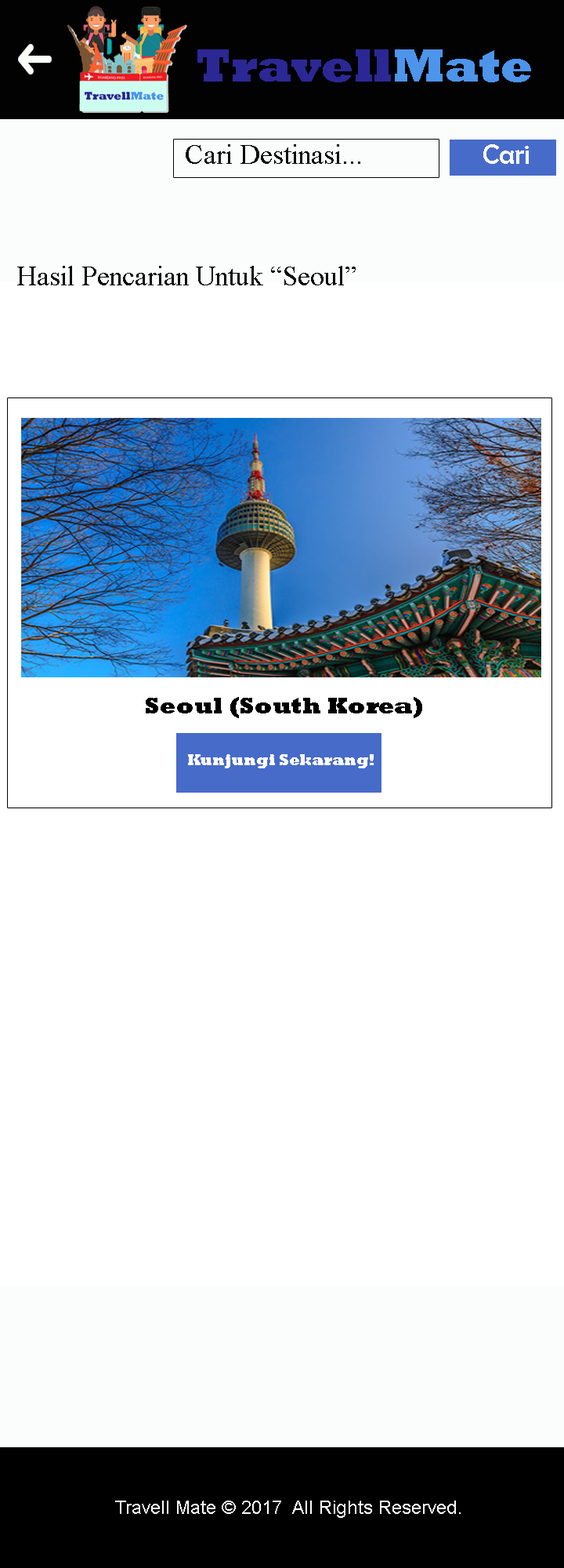
<style>
.page{position:relative;width:564px;height:1568px;background:#ffffff}
.page>*{position:absolute;margin:0}
.t1{font:47px "Rockwell-ExtraBold";color:#2b2896}
.t2{font:47px "Rockwell-ExtraBold";color:#4d94eb}
.t3{font:28.2px "TimesNewRomanPSMT";color:#0a0a0a}
.t4{font:28.2px "BerlinSansFB-Reg";color:#fdfefc}
.t5{font:28.2px "TimesNewRomanPSMT";color:#080808}
.t6{font:23.5px "Rockwell-ExtraBold";color:#010101}
.t7{font:15.7px "Rockwell-ExtraBold";color:#fdfcfa}
.t8{font:18.8px "ArialMT";color:#fefefd}
</style>
<div class="page">
<p class="t1" style="left:198px;top:49px;width:334px;height:33px">Travell<span class="t2">Mate</span></p>
<p class="t3" style="left:186px;top:144px;width:175px;height:20px">Cari Destinasi...</p>
<p class="t4" style="left:484px;top:144px;width:45px;height:20px">Cari</p>
<p class="t5" style="left:17px;top:266px;width:339px;height:19px">Hasil Pencarian Untuk “Seoul”</p>
<p class="t6" style="left:146px;top:697px;width:277px;height:21px">Seoul (South Korea)</p>
<p class="t7" style="left:188px;top:754px;width:186px;height:14px">Kunjungi Sekarang!</p>
<p class="t8" style="left:115px;top:1501px;width:346px;height:17px">Travell Mate © 2017  All Rights Reserved.</p>
</div>
